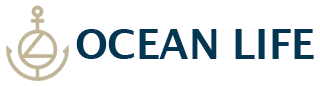
<style>
.page{position:relative;width:320px;height:86px;background:#ffffff}
.page>*{position:absolute;margin:0}
.t1{font:39.7px "LucidaGrande-Bold";color:#043651}
</style>
<div class="page">
<p class="t1" style="left:76px;top:29px;width:238px;height:30px">OCEAN LIFE</p>
</div>
